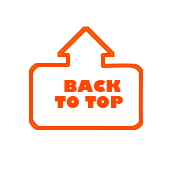
<style>
.page{position:relative;width:172px;height:172px;background:#ffffff}
.page>*{position:absolute;margin:0}
.t1{font:16px "GillSans-UltraBold";color:#ff4500}
</style>
<div class="page">
<p class="t1" style="left:64px;top:80px;width:57px;height:12px">BACK</p>
<p class="t1" style="left:55px;top:96px;width:68px;height:12px">TO TOP</p>
</div>
